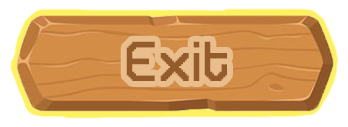
<style>
.page{position:relative;width:348px;height:127px;background:#ffffff}
.page>*{position:absolute;margin:0}
.t1{font:50.4px "Retron2000";color:#945c2b}
</style>
<div class="page">
<p class="t1" style="left:126px;top:41px;width:101px;height:40px">Exit</p>
</div>
